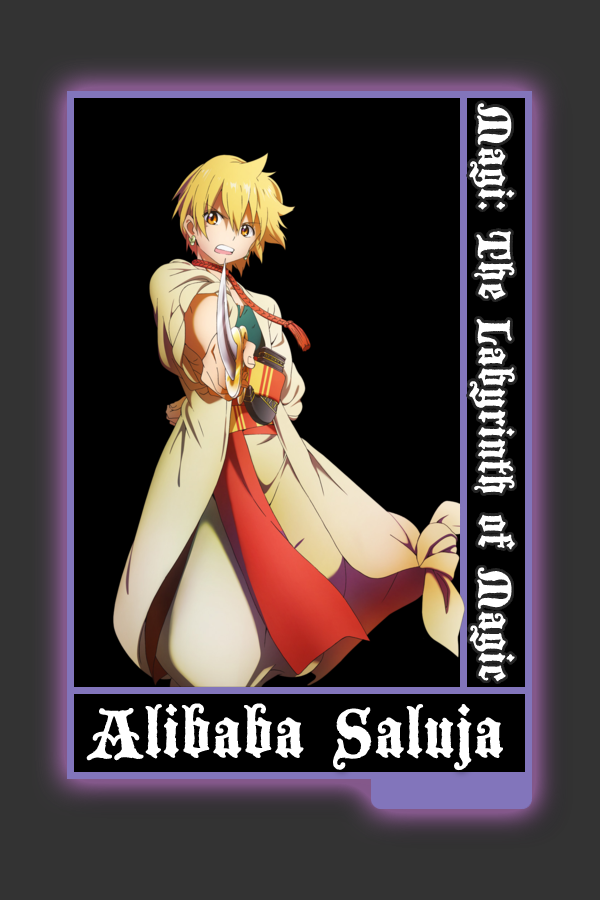
<style>
.page{position:relative;width:600px;height:900px;background:#000000}
.page>*{position:absolute;margin:0}
.t1{font:50px "BlackwoodCastle";color:#ffffff}
.t2{font:75px "BlackwoodCastle";color:#ffffff}
</style>
<div class="page">
<p class="t1" style="left:469px;top:103px;width:46px;height:579px;rotate:90deg">Magi: The Labyrinth of Magic</p>
<p class="t2" style="left:86px;top:703px;width:418px;height:68px">Alibaba Saluja</p>
</div>
